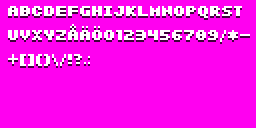
<style>
.page{position:relative;width:256px;height:128px;background:#ff00f0}
.page>*{position:absolute;margin:0}
.t1{font:16px/12px "SFIntermosaicB-Bold";color:#ffffff}
</style>
<div class="page">
<p class="t1" style="left:8px;top:6px;width:242px;height:60px">abcdefghijklmnopqrst<br><br>uvxyzåäö0123456789/*-<br><br>+[]()\/!?.:</p>
</div>
